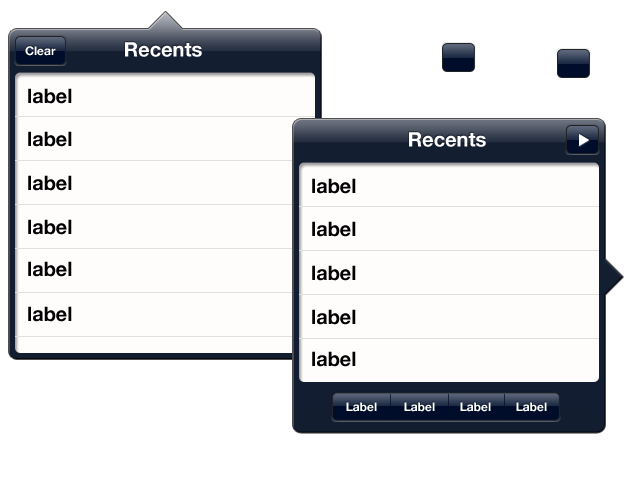
<style>
.page{position:relative;width:640px;height:480px;background:#fffcfc}
.page>*{position:absolute;margin:0}
.t1{font:12px "HelveticaNeue-Bold";color:#ffffff}
.t2{font:20px "HelveticaNeue-Bold";color:#ffffff}
.t3{font:20px "HelveticaNeue-Bold";color:#000000}
</style>
<div class="page">
<p class="t1" style="left:25px;top:46px;width:31px;height:10px">Clear</p>
<p class="t2" style="left:125px;top:42px;width:77px;height:15px">Recents</p>
<p class="t3" style="left:28px;top:88px;width:44px;height:16px">label</p>
<p class="t3" style="left:28px;top:131px;width:44px;height:16px">label</p>
<p class="t2" style="left:409px;top:132px;width:77px;height:15px">Recents</p>
<p class="t3" style="left:28px;top:175px;width:44px;height:16px">label</p>
<p class="t3" style="left:312px;top:178px;width:44px;height:16px">label</p>
<p class="t3" style="left:28px;top:219px;width:44px;height:16px">label</p>
<p class="t3" style="left:312px;top:221px;width:44px;height:16px">label</p>
<p class="t3" style="left:28px;top:261px;width:44px;height:16px">label</p>
<p class="t3" style="left:312px;top:265px;width:44px;height:16px">label</p>
<p class="t3" style="left:28px;top:306px;width:44px;height:16px">label</p>
<p class="t3" style="left:312px;top:309px;width:44px;height:16px">label</p>
<p class="t3" style="left:312px;top:351px;width:44px;height:16px">label</p>
<p class="t1" style="left:346px;top:402px;width:31px;height:10px">Label</p>
<p class="t1" style="left:404px;top:402px;width:31px;height:10px">Label</p>
<p class="t1" style="left:460px;top:402px;width:31px;height:10px">Label</p>
<p class="t1" style="left:516px;top:402px;width:31px;height:10px">Label</p>
</div>
